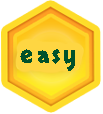
<style>
.page{position:relative;width:103px;height:114px;background:#ffffff}
.page>*{position:absolute;margin:0}
.t1{font:22px "Skranji-Bold";letter-spacing:0.15em;color:#01512b}
</style>
<div class="page">
<p class="t1" style="left:20px;top:49px;width:55px;height:22px">easy</p>
</div>
